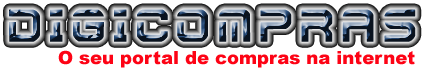
<style>
.page{position:relative;width:426px;height:69px;background:#ffffff}
.page>*{position:absolute;margin:0}
.t1{font:48px "Futura"}
.t2{font:18px "Arial-Black";color:#fd0315}
</style>
<div class="page">
<p class="t1" style="left:9px;top:9px;width:407px;height:33px">Digicompras</p>
<p class="t2" style="left:58px;top:50px;width:357px;height:18px">O seu portal de compras na internet</p>
</div>
